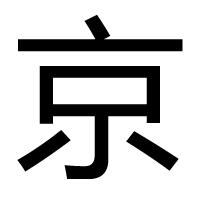
<style>
.page{position:relative;width:200px;height:200px;background:#ffffff}
.page>*{position:absolute;margin:0}
.t1{font:172px "YaHei-Consolas-Hybrid";color:#000000}
</style>
<div class="page">
<p class="t1" style="left:17px;top:14px;width:166px;height:165px">京</p>
</div>
